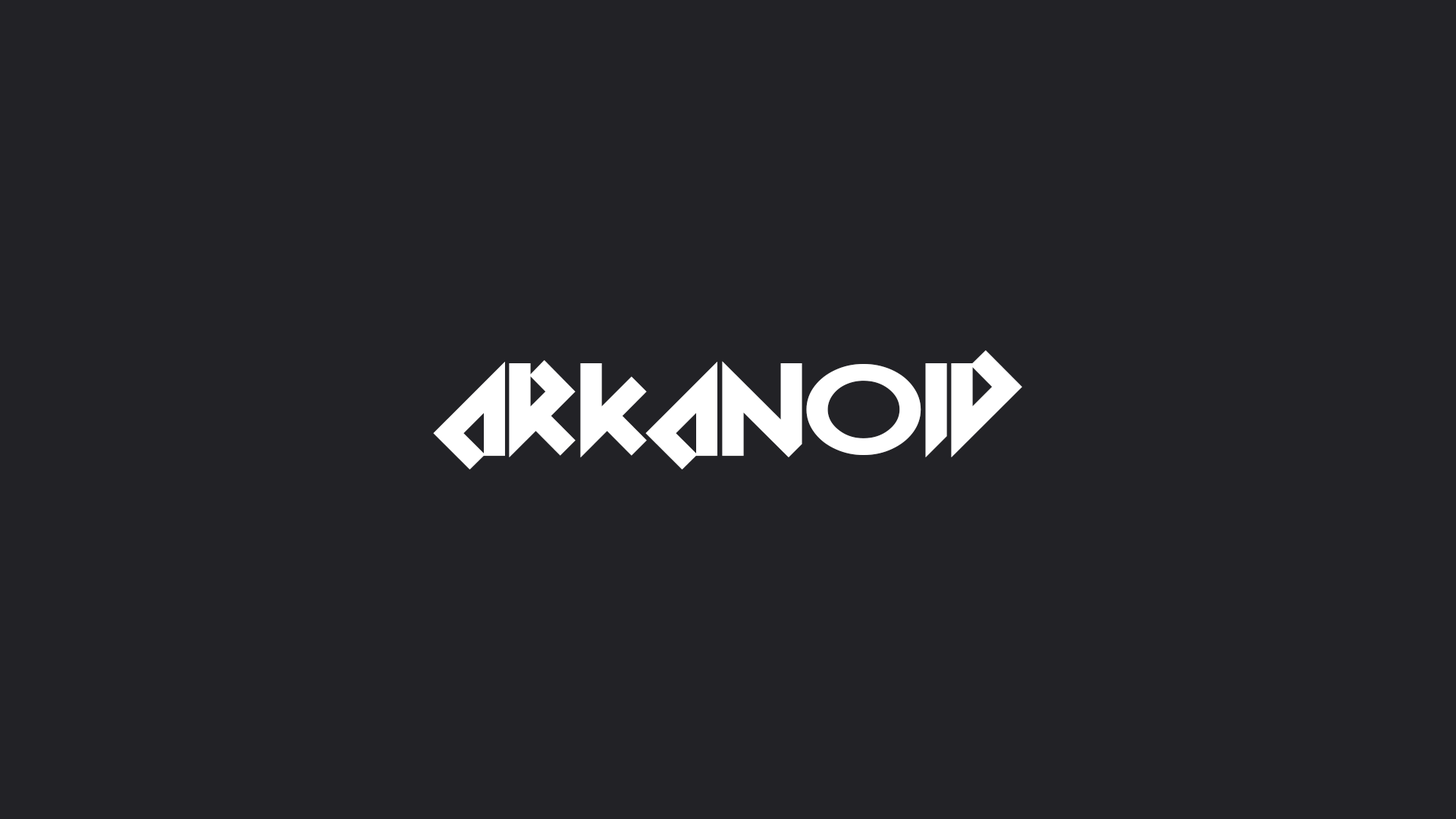
<style>
.page{position:relative;width:1456px;height:819px;background:#222226}
.page>*{position:absolute;margin:0}
.t1{font:109.2px "ArkanoidSolid";color:#ffffff}
</style>
<div class="page">
<p class="t1" style="left:433px;top:350px;width:589px;height:119px">Arkanoid</p>
</div>
